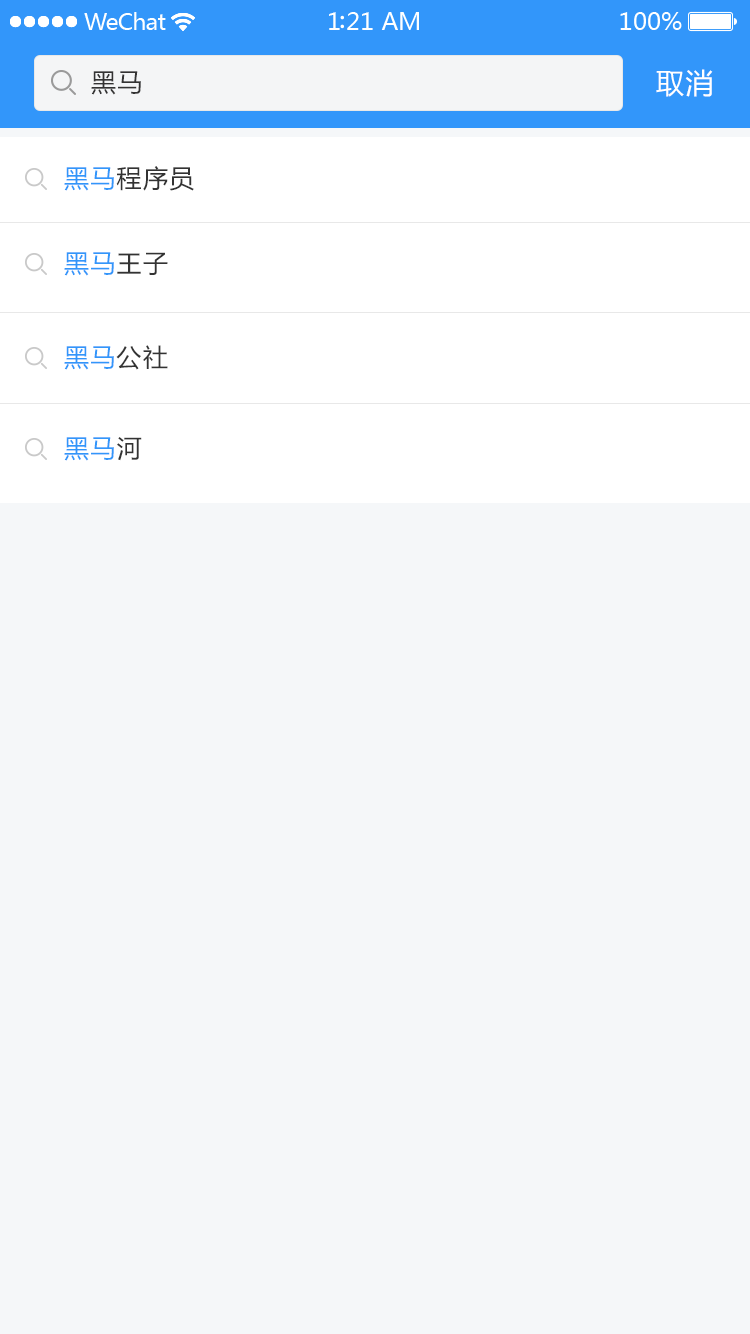
<style>
.page{position:relative;width:750px;height:1334px;background:#f5f7f9}
.page>*{position:absolute;margin:0}
.t1{font:25px "MicrosoftYaHei";letter-spacing:0.05em;color:#333333}
.t2{font:28px "MicrosoftYaHei";letter-spacing:0.05em;color:#ffffff}
.t3{font:25px "MicrosoftYaHei";letter-spacing:0.05em;color:#3296fa}
</style>
<div class="page">
<p class="t1" style="left:91px;top:71px;width:50px;height:24px">黑马</p>
<p class="t2" style="left:656px;top:69px;width:57px;height:28px">取消</p>
<p class="t2" style="left:656px;top:69px;width:57px;height:28px">取消</p>
<p class="t1" style="left:64px;top:166px;width:130px;height:25px"><span class="t3">黑马</span>程序员</p>
<p class="t3" style="left:64px;top:252px;width:104px;height:24px">黑马<span class="t1">王子</span></p>
<p class="t3" style="left:64px;top:345px;width:104px;height:25px">黑马<span class="t1">公社</span></p>
<p class="t3" style="left:64px;top:437px;width:78px;height:24px">黑马<span class="t1">河</span></p>
</div>
